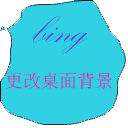
<style>
.page{position:relative;width:128px;height:128px;background:#30d1e4}
.page>*{position:absolute;margin:0}
.t1{font:48px "KunstlerScript";color:#5a40db}
.t2{font:18px "SimSun";color:#ea21aa}
</style>
<div class="page">
<p class="t1" style="left:31px;top:16px;width:57px;height:38px">bing</p>
<p class="t2" style="left:6px;top:72px;width:106px;height:17px">更改桌面背景</p>
</div>
